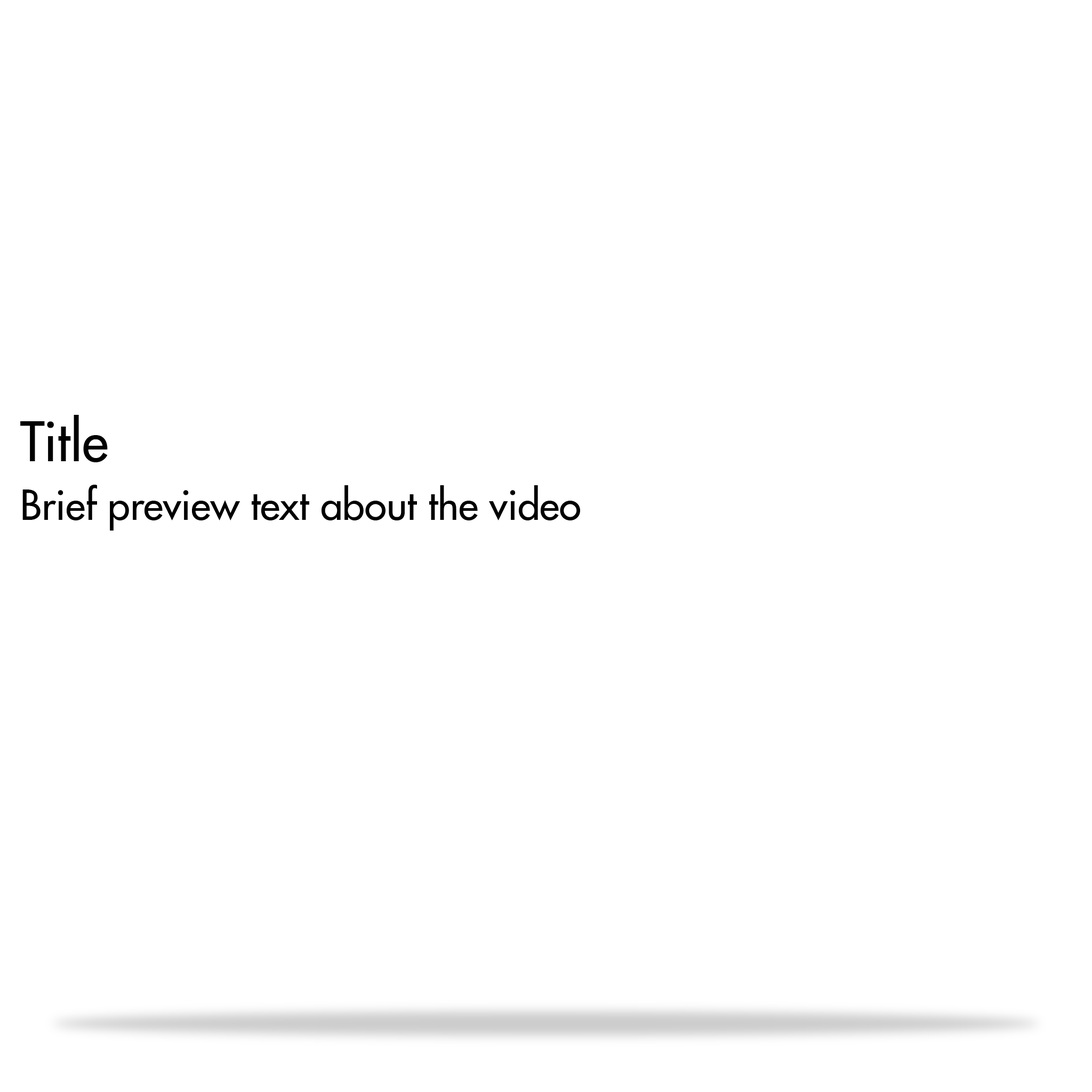
<style>
.page{position:relative;width:1092px;height:1092px;background:#ffffff}
.page>*{position:absolute;margin:0}
.t1{font:53.3px "FuturaLTPro-Medium";color:#000000}
.t2{font:40px "FuturaLTPro-Medium";color:#000000}
</style>
<div class="page">
<p class="t1" style="left:20px;top:415px;width:88px;height:47px">Title</p>
<p class="t2" style="left:22px;top:485px;width:558px;height:46px">Brief preview text about the video</p>
</div>
